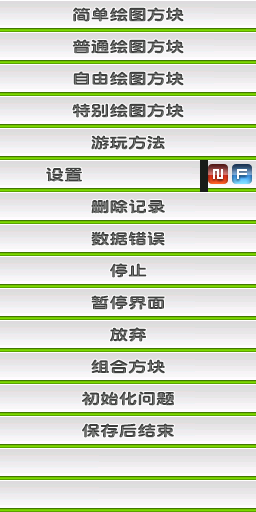
<style>
.page{position:relative;width:256px;height:512px;background:#427900}
.page>*{position:absolute;margin:0}
.t1{font:14.9px "DFPYuanW9";color:#484a48;scale:1.25 1}
.t2{font:14.9px "DFPYuanW9";scale:1.25 1}
.t3{font:14.9px "DFPYuanW9";color:#4c4d4c;scale:1.25 1}
</style>
<div class="page">
<p class="t1" style="left:73px;top:7px;width:111px;height:15px">简单绘图方块</p>
<p class="t1" style="left:72px;top:39px;width:112px;height:15px">普通绘图方块</p>
<p class="t1" style="left:73px;top:71px;width:111px;height:15px">自由绘图方块</p>
<p class="t1" style="left:72px;top:103px;width:112px;height:15px">特别绘图方块</p>
<p class="t2" style="left:91px;top:135px;width:74px;height:15px">游玩方法</p>
<p class="t2" style="left:46px;top:167px;width:36px;height:15px">设置</p>
<p class="t2" style="left:91px;top:199px;width:74px;height:15px">删除记录</p>
<p class="t2" style="left:91px;top:231px;width:74px;height:15px">数据错误</p>
<p class="t2" style="left:110px;top:263px;width:37px;height:15px">停止</p>
<p class="t2" style="left:91px;top:295px;width:74px;height:15px">暂停界面</p>
<p class="t3" style="left:110px;top:327px;width:36px;height:15px">放弃</p>
<p class="t2" style="left:91px;top:359px;width:74px;height:15px">组合方块</p>
<p class="t3" style="left:81px;top:391px;width:93px;height:15px">初始化问题</p>
<p class="t2" style="left:82px;top:423px;width:92px;height:15px">保存后结束</p>
</div>
